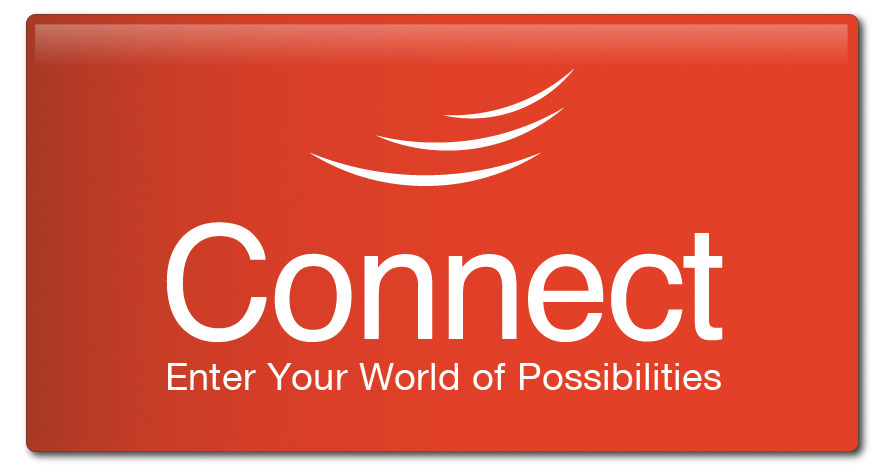
<style>
.page{position:relative;width:888px;height:475px}
.page>*{position:absolute;margin:0}
.t1{font:37.5px "HelveticaNeue-Roman-WHAM";letter-spacing:0.015em;color:#ffffff}
</style>
<div class="page">
<p class="t1" style="left:168px;top:363px;width:553px;height:27px">Enter Your World of Possibilities</p>
</div>
